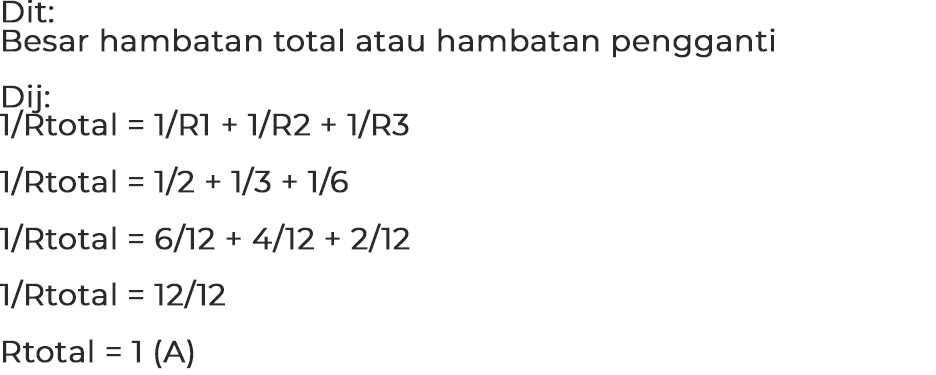
<style>
.page{position:relative;width:936px;height:375px;background:#ffffff}
.page>*{position:absolute;margin:0}
.t1{font:30px/28.3px "Montserrat-Regular";letter-spacing:0.005em;color:#2a2a2a;font-weight:bold}
</style>
<div class="page">
<p class="t1" style="left:0px;top:0px;width:775px;height:369px">Dit:<br>Besar hambatan total atau hambatan pengganti<br><br>Dij:<br>1/Rtotal = 1/R1 + 1/R2 + 1/R3<br><br>1/Rtotal = 1/2 + 1/3 + 1/6<br><br>1/Rtotal = 6/12 + 4/12 + 2/12<br><br>1/Rtotal = 12/12<br><br>Rtotal = 1 (A)</p>
</div>
